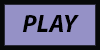
<style>
.page{position:relative;width:100px;height:50px;background:#9591c6}
.page>*{position:absolute;margin:0}
.t1{font:25px "MyriadPro-BoldIt";color:#000000}
</style>
<div class="page">
<p class="t1" style="left:22px;top:15px;width:57px;height:17px">PLAY</p>
</div>
